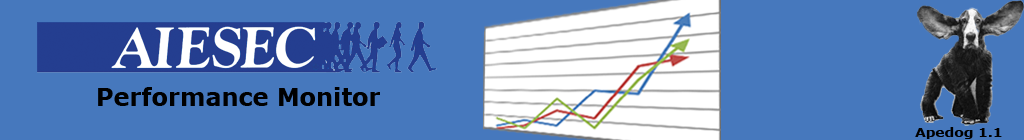
<style>
.page{position:relative;width:1024px;height:140px;background:#4678bd}
.page>*{position:absolute;margin:0}
.t1{font:24px "Verdana-Bold";color:#000000}
.t2{font:12px "Verdana-Bold";color:#000000;scale:1.15 1}
</style>
<div class="page">
<p class="t1" style="left:98px;top:87px;width:282px;height:19px">Performance Monitor</p>
<p class="t2" style="left:915px;top:127px;width:87px;height:12px">Apedog 1.1</p>
</div>
